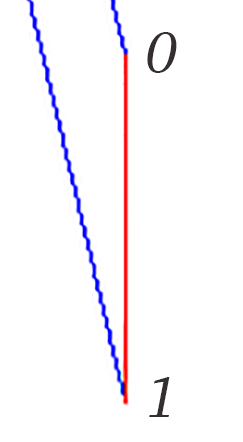
<style>
.page{position:relative;width:243px;height:442px;background:#ffffff}
.page>*{position:absolute;margin:0}
.t1{font:58.3px "Charter-Roman";letter-spacing:-0.02em;color:#352e31;font-style:italic}
</style>
<div class="page">
<p class="t1" style="left:147px;top:32px;width:30px;height:41px">0</p>
<p class="t1" style="left:149px;top:377px;width:21px;height:40px">1</p>
</div>
